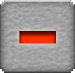
<style>
.page{position:relative;width:75px;height:73px}
.page>*{position:absolute;margin:0}
.t1{font:48.7px "Nintendo-NES-Font";letter-spacing:-0.46em}
</style>
<div class="page">
<p class="t1" style="left:19px;top:31px;width:37px;height:13px">-</p>
</div>
